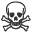
<style>
.page{position:relative;width:32px;height:32px;background:#ffffff}
.page>*{position:absolute;margin:0}
.t1{font:50px "Menlo-Regular";color:#333333;text-transform:uppercase}
</style>
<div class="page">
<p class="t1" style="left:1px;top:1px;width:30px;height:31px">☠</p>
</div>
